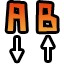
<style>
.page{position:relative;width:64px;height:64px;background:#ffffff}
.page>*{position:absolute;margin:0}
.t1{font:36px "PaperCuts2"}
</style>
<div class="page">
<p class="t1" style="left:7px;top:3px;width:19px;height:28px">A</p>
<p class="t1" style="left:38px;top:3px;width:19px;height:29px">B</p>
</div>
